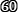
<style>
.page{position:relative;width:18px;height:12px;background:#ffffff}
.page>*{position:absolute;margin:0}
.t1{font:17px "Perpetua-Bold";color:#ffffff}
</style>
<div class="page">
<p class="t1" style="left:1px;top:1px;width:16px;height:10px">60</p>
</div>
